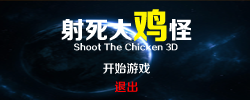
<style>
.page{position:relative;width:250px;height:100px}
.page>*{position:absolute;margin:0}
.t1{font:24px "FZZDHJW--GB1-0";color:#ffffff}
.t2{font:36px "FZZDHJW--GB1-0";color:#fff600}
.t3{font:8px "FZZCHJW--GB1-0";color:#ffffff}
.t4{font:12px "FZZZHONGJW--GB1-0";color:#fefefe}
.t5{font:12px "FZZZHONGJW--GB1-0";color:#ff0000}
</style>
<div class="page">
<p class="t1" style="left:61px;top:9px;width:131px;height:33px">射死大<span class="t2">鸡</span>怪</p>
<p class="t3" style="left:74px;top:43px;width:104px;height:8px">Shoot The Chicken 3D</p>
<p class="t4" style="left:103px;top:62px;width:47px;height:12px">开始游戏</p>
<p class="t5" style="left:115px;top:81px;width:23px;height:12px">退出</p>
</div>
